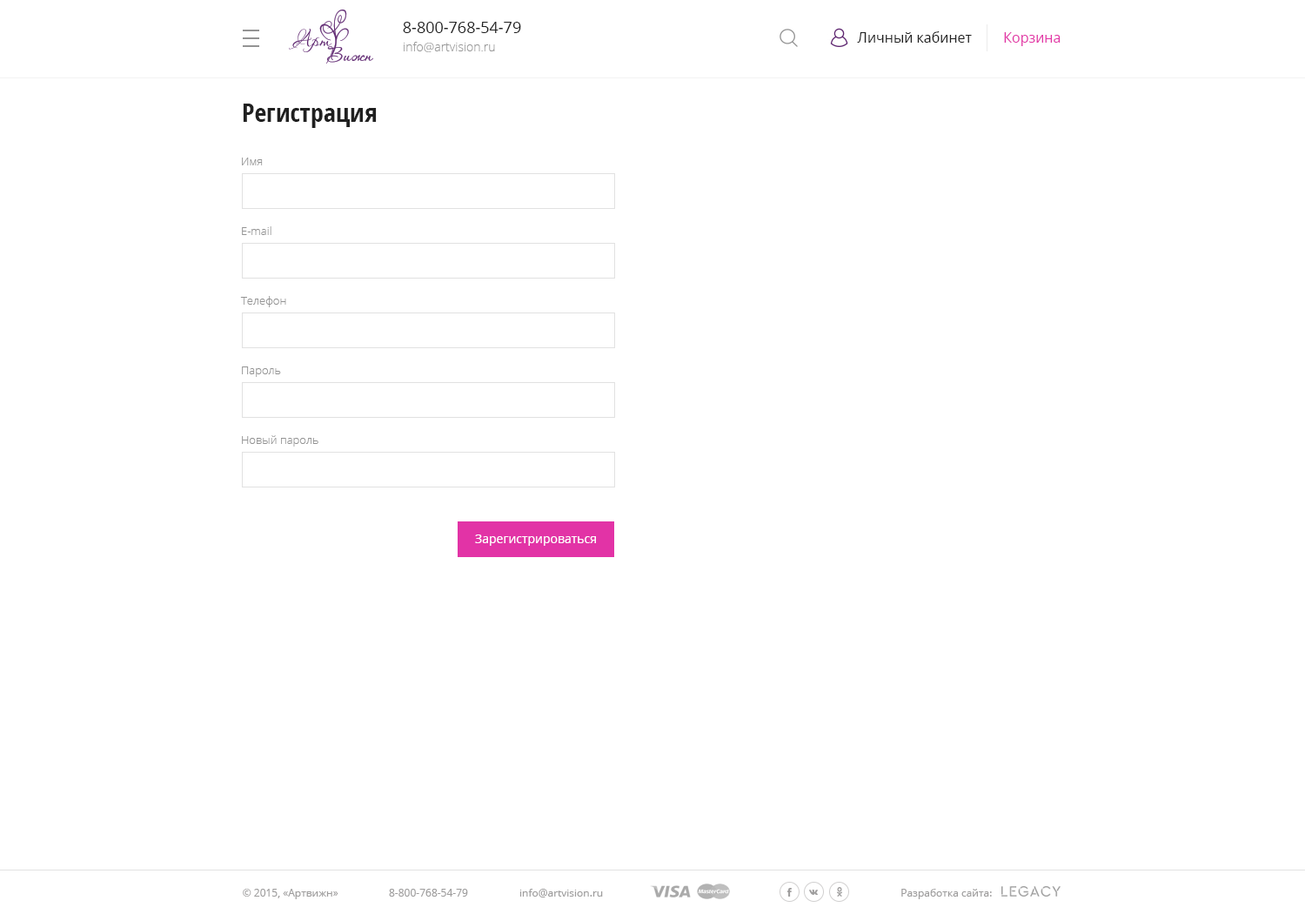
<style>
.page{position:relative;width:1305px;height:914px;background:#ffffff}
.page>*{position:absolute;margin:0}
.t1{font:15.7px "OpenSans";color:#202020}
.t2{font:12.2px "OpenSans-Light";color:#999999}
.t3{font:13.9px "OpenSans";color:#202020}
.t4{font:13.9px "OpenSans";color:#e233a6}
.t5{font:26.1px "OpenSans-CondensedBold";color:#202020}
.t6{font:11.3px "OpenSans-Light";color:#939393}
.t7{font:12.2px "OpenSans";color:#ffffff}
.t8{font:10.4px "OpenSans";color:#9e9d9d}
</style>
<div class="page">
<p class="t1" style="left:403px;top:22px;width:118px;height:11px">8-800-768-54-79</p>
<p class="t2" style="left:404px;top:42px;width:91px;height:10px">info@artvision.ru</p>
<p class="t3" style="left:857px;top:31px;width:115px;height:12px">Личный кабинет</p>
<p class="t4" style="left:1004px;top:32px;width:57px;height:14px">Корзина</p>
<p class="t5" style="left:243px;top:104px;width:134px;height:24px">Регистрация</p>
<p class="t6" style="left:242px;top:157px;width:21px;height:8px">Имя</p>
<p class="t6" style="left:242px;top:226px;width:29px;height:9px">E-mail</p>
<p class="t6" style="left:240px;top:296px;width:46px;height:11px">Телефон</p>
<p class="t6" style="left:242px;top:366px;width:39px;height:11px">Пароль</p>
<p class="t6" style="left:242px;top:435px;width:76px;height:11px">Новый пароль</p>
<p class="t7" style="left:475px;top:534px;width:121px;height:12px">Зарегистрироваться</p>
<p class="t8" style="left:243px;top:888px;width:95px;height:11px">© 2015, «Артвижн»</p>
<p class="t8" style="left:389px;top:888px;width:79px;height:8px">8-800-768-54-79</p>
<p class="t8" style="left:519px;top:888px;width:84px;height:9px">info@artvision.ru</p>
<p class="t8" style="left:901px;top:888px;width:91px;height:11px">Разработка сайта:</p>
</div>
